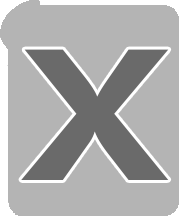
<style>
.page{position:relative;width:179px;height:216px;background:#b4b4b4}
.page>*{position:absolute;margin:0}
.t1{font:173px "Futura-CondensedMedium";color:#6a6a6a;scale:2.24 1}
</style>
<div class="page">
<p class="t1" style="left:21px;top:49px;width:148px;height:131px">X</p>
</div>
